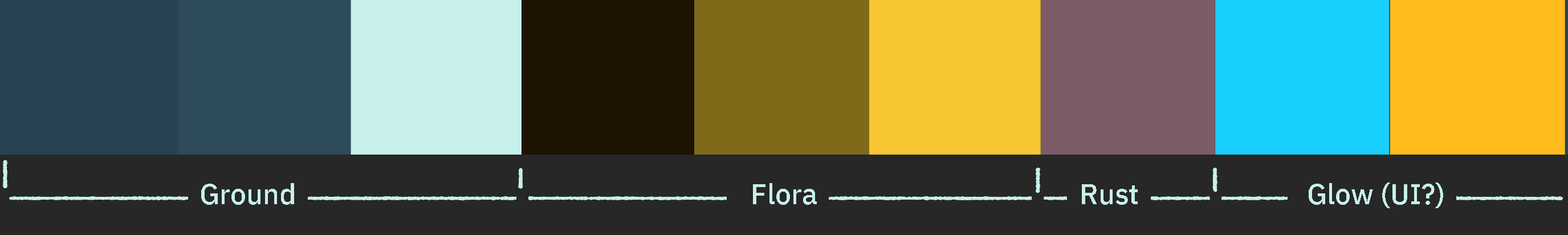
<style>
.page{position:relative;width:1568px;height:235px;background:#272727}
.page>*{position:absolute;margin:0}
.t1{font:28.5px "IBMPlexSans-Medium";color:#c7f0ea}
</style>
<div class="page">
<p class="t1" style="left:201px;top:183px;width:93px;height:22px">Ground</p>
<p class="t1" style="left:753px;top:183px;width:64px;height:22px">Flora</p>
<p class="t1" style="left:1082px;top:184px;width:56px;height:21px">Rust</p>
<p class="t1" style="left:1309px;top:182px;width:134px;height:26px">Glow (UI?)</p>
</div>
